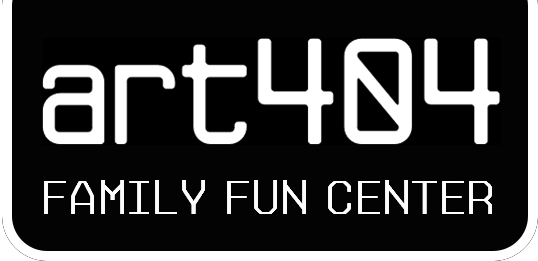
<style>
.page{position:relative;width:538px;height:261px;background:#040303}
.page>*{position:absolute;margin:0}
.t1{font:47.6px "Gerusa-Medium";letter-spacing:0.02em;color:#fefdfd;text-transform:uppercase}
</style>
<div class="page">
<p class="t1" style="left:44px;top:180px;width:447px;height:34px">FAMILY FUN CENTER</p>
<p class="t1" style="left:44px;top:180px;width:447px;height:34px">FAMILY FUN CENTER</p>
<p class="t1" style="left:45px;top:180px;width:447px;height:34px">FAMILY FUN CENTER</p>
<p class="t1" style="left:45px;top:180px;width:447px;height:34px">FAMILY FUN CENTER</p>
<p class="t1" style="left:45px;top:180px;width:447px;height:34px">FAMILY FUN CENTER</p>
<p class="t1" style="left:45px;top:180px;width:447px;height:34px">FAMILY FUN CENTER</p>
</div>
